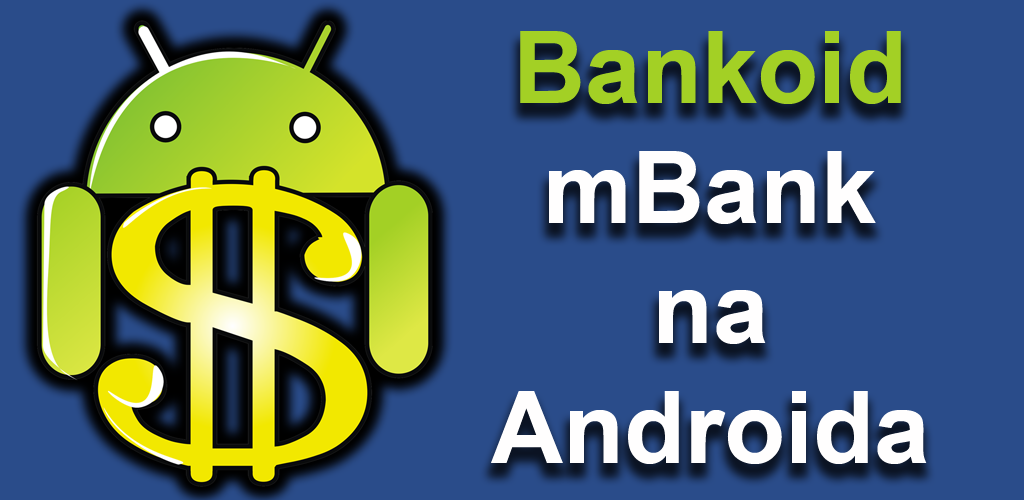
<style>
.page{position:relative;width:1024px;height:500px;background:#2a4c8a}
.page>*{position:absolute;margin:0}
.t1{font:100px "Arial-BoldMT";color:#fffefe}
.t2{font:100px "Arial-BoldMT";color:#a3d025}
</style>
<div class="page">
<p class="t1" style="left:491px;top:31px;width:436px;height:433px;text-align:center"><span class="t2">Bankoid<br></span>mBank<br>na<br>Androida</p>
</div>
